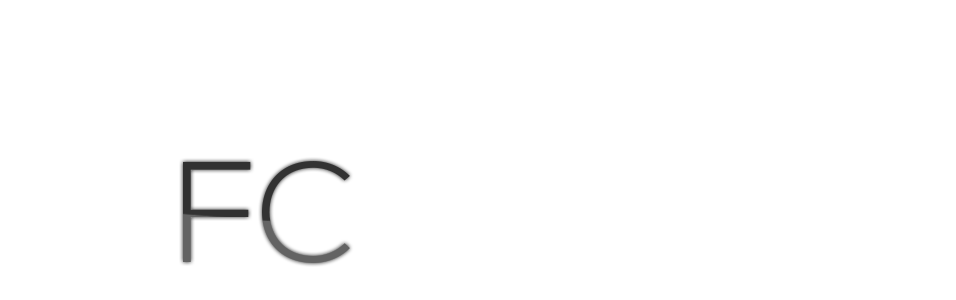
<style>
.page{position:relative;width:956px;height:300px;background:#ffffff}
.page>*{position:absolute;margin:0}
.t1{font:142.2px "NexaLight"}
</style>
<div class="page">
<p class="t1" style="left:183px;top:161px;width:167px;height:102px">FC</p>
</div>
